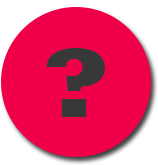
<style>
.page{position:relative;width:158px;height:165px;background:#ef0048}
.page>*{position:absolute;margin:0}
.t1{font:100px "Rockwell-ExtraBold";color:#383838}
</style>
<div class="page">
<p class="t1" style="left:46px;top:48px;width:59px;height:69px">?</p>
</div>
